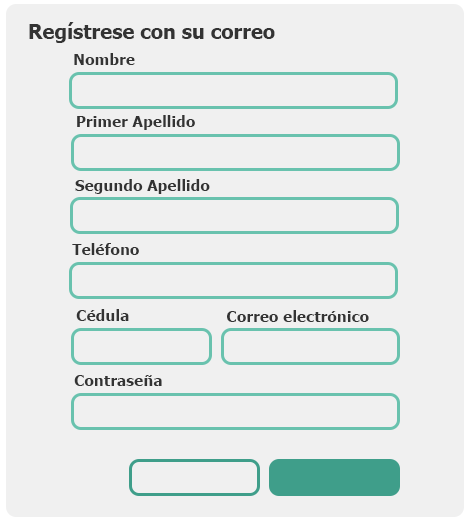
<style>
.page{position:relative;width:470px;height:520px;background:#f0f0f0}
.page>*{position:absolute;margin:0}
.t1{font:20px "Tahoma-Bold";color:#333333}
.t2{font:15.4px "Tahoma-Bold";color:#333333}
</style>
<div class="page">
<p class="t1" style="left:29px;top:22px;width:246px;height:21px">Regístrese con su correo</p>
<p class="t2" style="left:74px;top:53px;width:61px;height:12px">Nombre</p>
<p class="t2" style="left:77px;top:115px;width:118px;height:15px">Primer Apellido</p>
<p class="t2" style="left:75px;top:179px;width:135px;height:15px">Segundo Apellido</p>
<p class="t2" style="left:72px;top:243px;width:67px;height:12px">Teléfono</p>
<p class="t2" style="left:76px;top:309px;width:53px;height:12px">Cédula</p>
<p class="t2" style="left:227px;top:310px;width:142px;height:12px">Correo electrónico</p>
<p class="t2" style="left:74px;top:375px;width:88px;height:11px">Contraseña</p>
</div>
